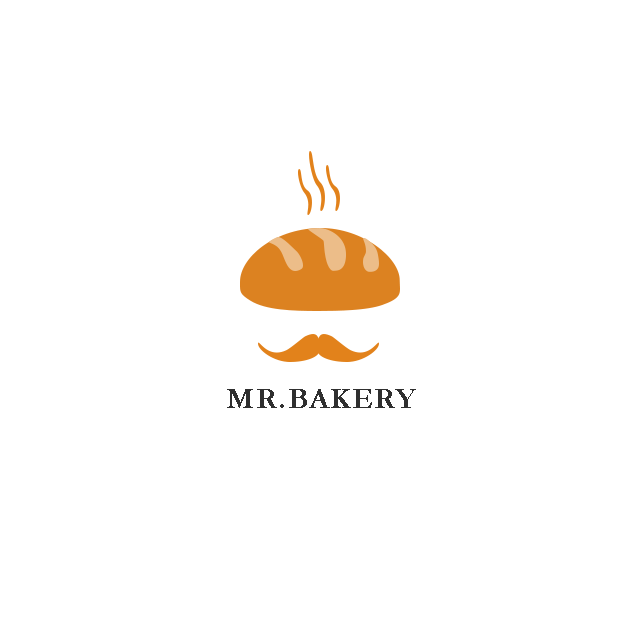
<style>
.page{position:relative;width:640px;height:640px;background:#ffffff}
.page>*{position:absolute;margin:0}
.t1{font:30px "Garamond-Bold";letter-spacing:0.05em;color:#2f2f2f}
</style>
<div class="page">
<p class="t1" style="left:227px;top:389px;width:189px;height:19px">MR.BAKERY</p>
</div>
